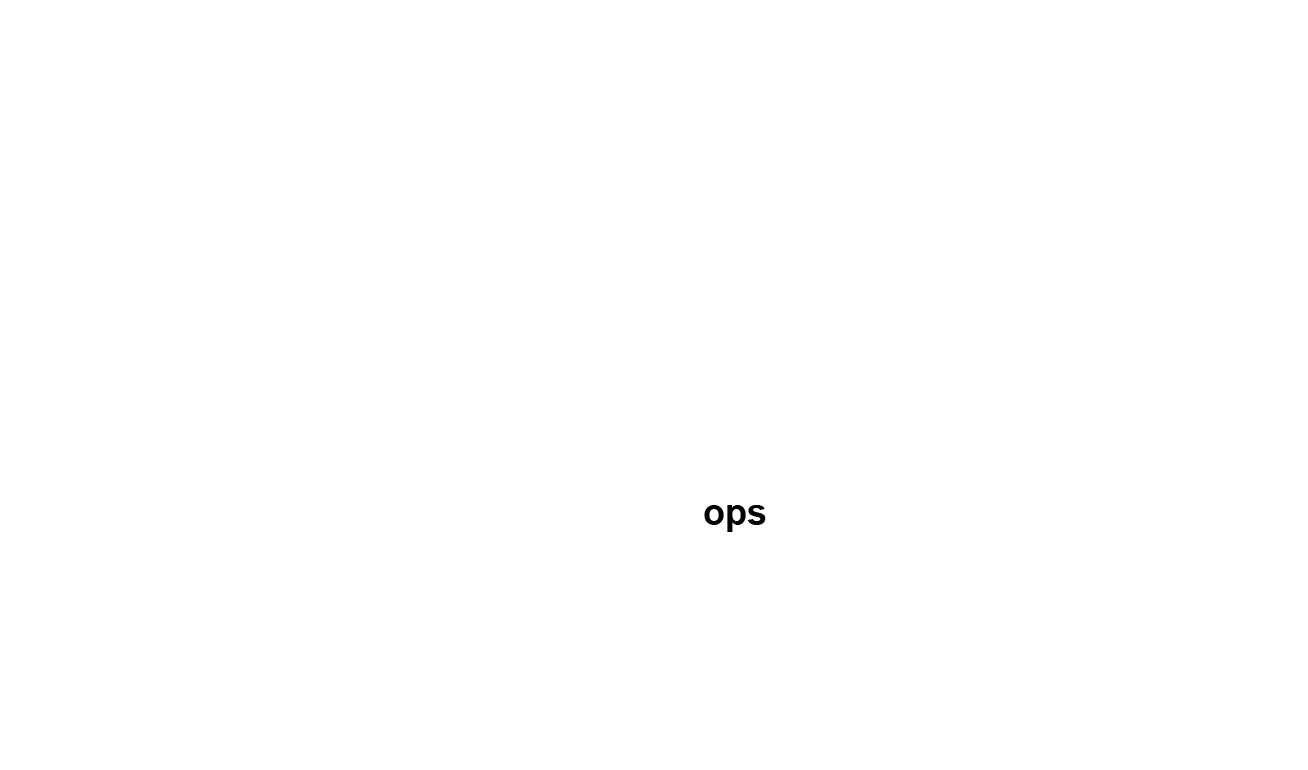
<style>
.page{position:relative;width:1308px;height:770px;background:#ffffff}
.page>*{position:absolute;margin:0}
.t1{font:36px "Arial-BoldMT";color:#020202}
</style>
<div class="page">
<p class="t1" style="left:704px;top:505px;width:62px;height:27px">ops</p>
</div>
